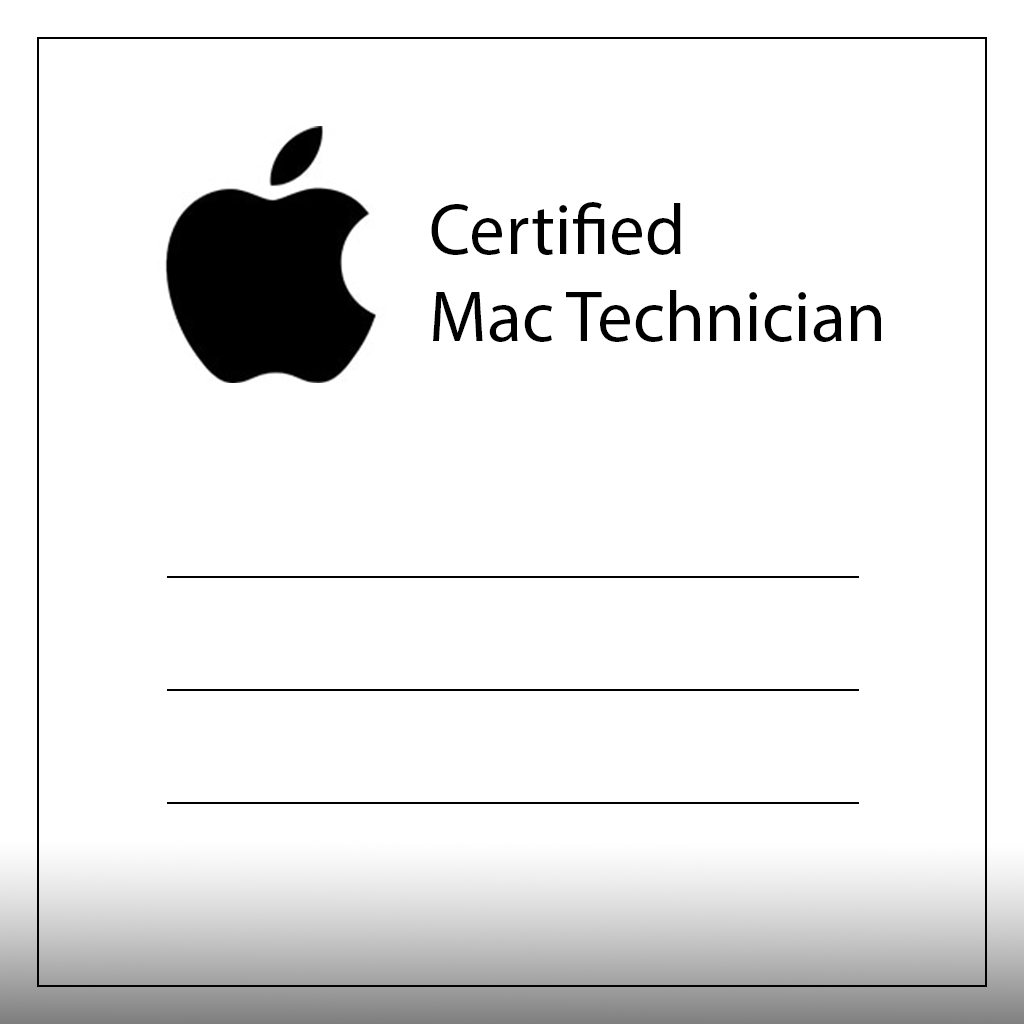
<style>
.page{position:relative;width:1024px;height:1024px;background:#ffffff}
.page>*{position:absolute;margin:0}
.t1{font:72px "MyriadPro-Regular";color:#010000}
</style>
<div class="page">
<p class="t1" style="left:431px;top:202px;width:450px;height:140px">Certified<br>Mac Technician</p>
</div>
